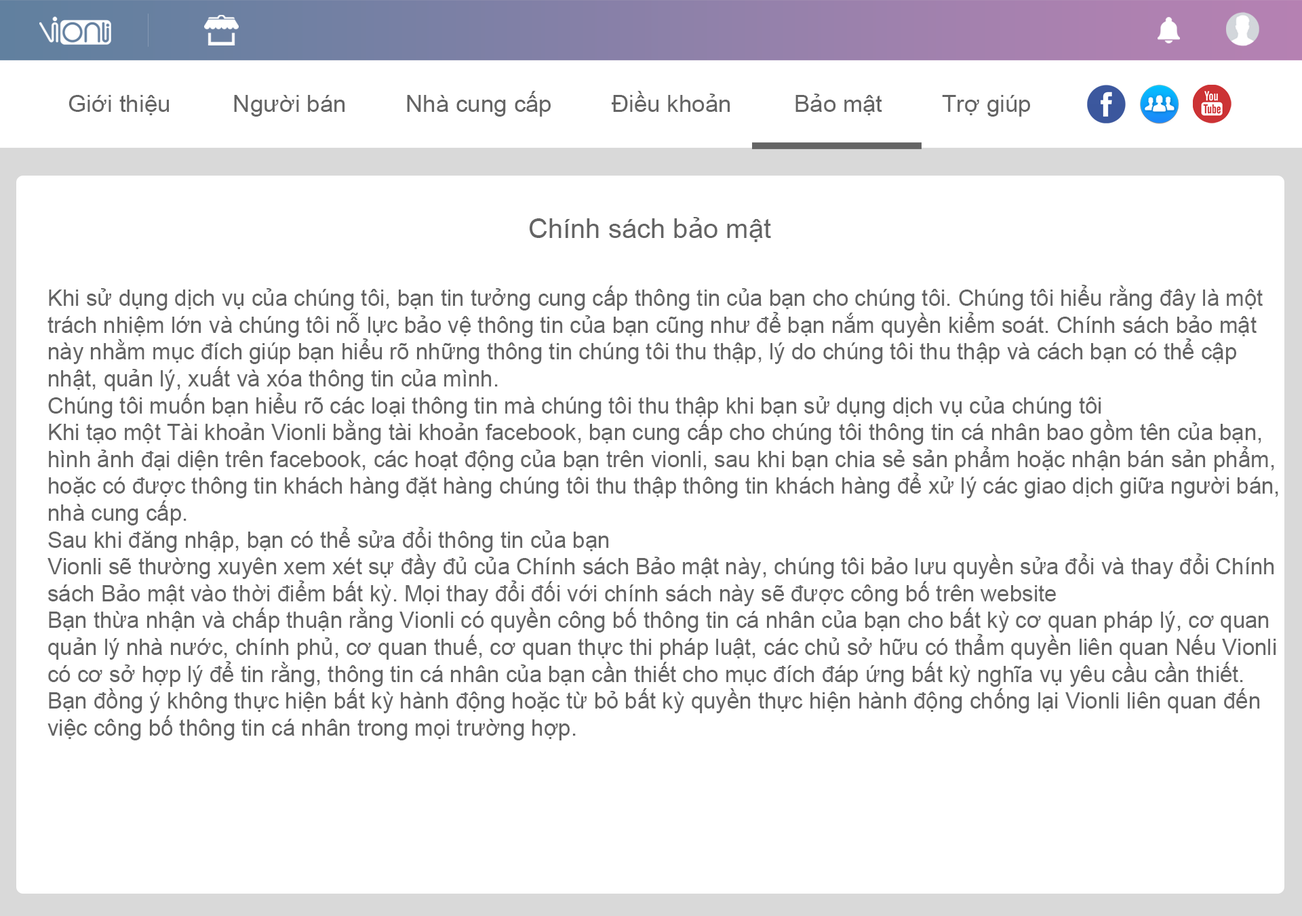
<style>
.page{position:relative;width:1302px;height:916px;background:#ffffff}
.page>*{position:absolute;margin:0}
.t1{font:23.7px "ArialMT";color:#646464}
.t2{font:27.1px "ArialMT";color:#646464}
.t3{font:22.4px "ArialMT";color:#646464}
</style>
<div class="page">
<p class="t1" style="left:68px;top:95px;width:101px;height:20px">Giới thiệu</p>
<p class="t1" style="left:234px;top:95px;width:111px;height:22px">Người bán</p>
<p class="t1" style="left:407px;top:91px;width:144px;height:26px">Nhà cung cấp</p>
<p class="t1" style="left:612px;top:91px;width:118px;height:21px">Điều khoản</p>
<p class="t1" style="left:795px;top:94px;width:87px;height:21px">Bảo mật</p>
<p class="t1" style="left:942px;top:95px;width:88px;height:22px">Trợ giúp</p>
<p class="t2" style="left:530px;top:217px;width:241px;height:25px">Chính sách bảo mật</p>
<p class="t3" style="left:47px;top:285px;width:1231px;height:455px">Khi sử dụng dịch vụ của chúng tôi, bạn tin tưởng cung cấp thông tin của bạn cho chúng tôi. Chúng tôi hiểu rằng đây là một<br>trách nhiệm lớn và chúng tôi nỗ lực bảo vệ thông tin của bạn cũng như để bạn nắm quyền kiểm soát. Chính sách bảo mật <br>này nhằm mục đích giúp bạn hiểu rõ những thông tin chúng tôi thu thập, lý do chúng tôi thu thập và cách bạn có thể cập <br>nhật, quản lý, xuất và xóa thông tin của mình.<br>Chúng tôi muốn bạn hiểu rõ các loại thông tin mà chúng tôi thu thập khi bạn sử dụng dịch vụ của chúng tôi<br>Khi tạo một Tài khoản Vionli bằng tài khoản facebook, bạn cung cấp cho chúng tôi thông tin cá nhân bao gồm tên của bạn,<br>hình ảnh đại diện trên facebook, các hoạt động của bạn trên vionli, sau khi bạn chia sẻ sản phẩm hoặc nhận bán sản phẩm,<br>hoặc có được thông tin khách hàng đặt hàng chúng tôi thu thập thông tin khách hàng để xử lý các giao dịch giữa người bán,<br>nhà cung cấp. <br>Sau khi đăng nhập, bạn có thể sửa đổi thông tin của bạn<br>Vionli sẽ thường xuyên xem xét sự đầy đủ của Chính sách Bảo mật này, chúng tôi bảo lưu quyền sửa đổi và thay đổi Chính <br>sách Bảo mật vào thời điểm bất kỳ. Mọi thay đổi đối với chính sách này sẽ được công bố trên website<br>Bạn thừa nhận và chấp thuận rằng Vionli có quyền công bố thông tin cá nhân của bạn cho bất kỳ cơ quan pháp lý, cơ quan<br>quản lý nhà nước, chính phủ, cơ quan thuế, cơ quan thực thi pháp luật, các chủ sở hữu có thẩm quyền liên quan Nếu Vionli<br>có cơ sở hợp lý để tin rằng, thông tin cá nhân của bạn cần thiết cho mục đích đáp ứng bất kỳ nghĩa vụ yêu cầu cần thiết.<br>Bạn đồng ý không thực hiện bất kỳ hành động hoặc từ bỏ bất kỳ quyền thực hiện hành động chống lại Vionli liên quan đến<br>việc công bố thông tin cá nhân trong mọi trường hợp.</p>
</div>
